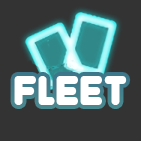
<style>
.page{position:relative;width:141px;height:141px;background:#333333}
.page>*{position:absolute;margin:0}
.t1{font:48px "Junegull";color:#ffffff}
</style>
<div class="page">
<p class="t1" style="left:14px;top:76px;width:113px;height:29px">Fleet</p>
</div>
